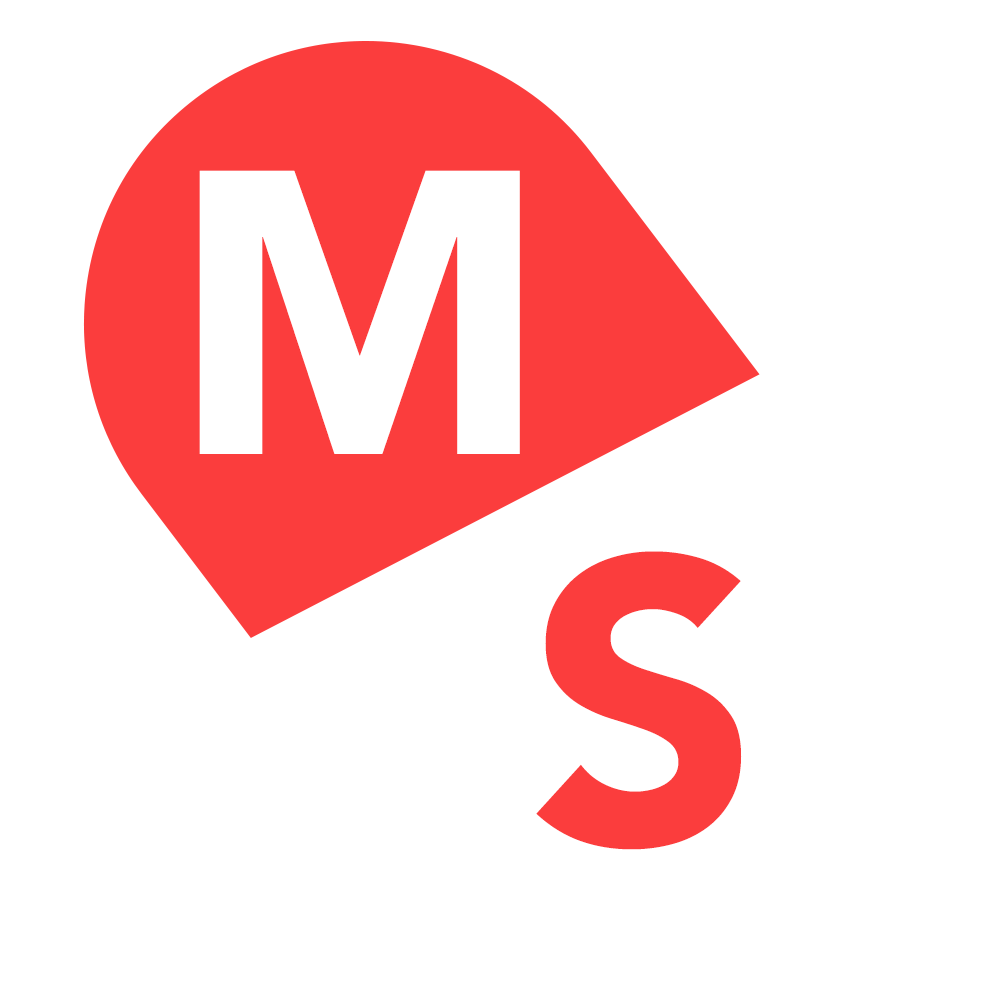
<style>
.page{position:relative;width:1000px;height:1000px;background:#ffffff}
.page>*{position:absolute;margin:0}
.t1{font:400px "Avenir-Black";color:#ffffff}
.t2{font:400px "Avenir-Black";color:#fb3d3d}
</style>
<div class="page">
<p class="t1" style="left:199px;top:170px;width:321px;height:284px">M</p>
<p class="t2" style="left:536px;top:551px;width:206px;height:299px">S</p>
</div>
